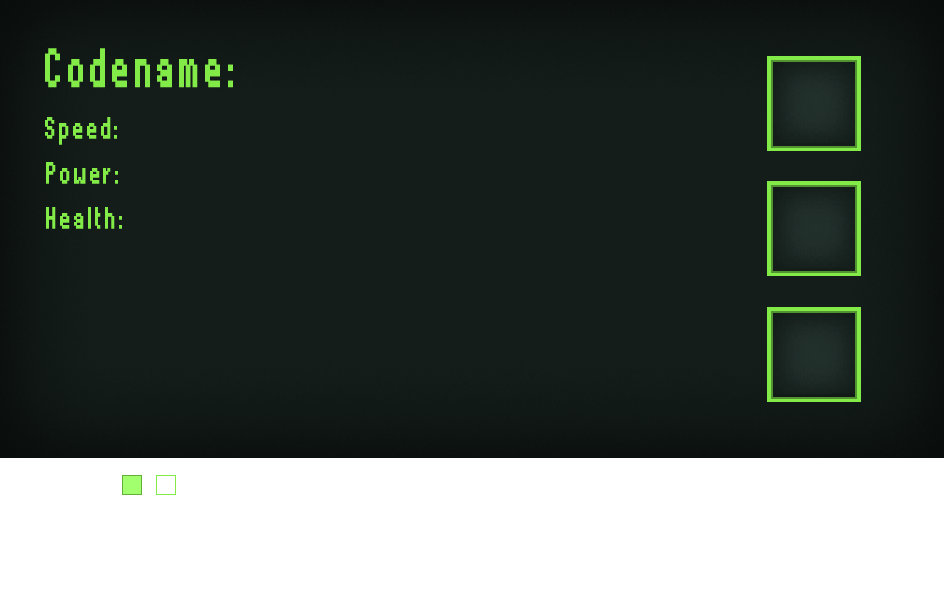
<style>
.page{position:relative;width:944px;height:598px;background:#141d1a}
.page>*{position:absolute;margin:0}
.t1{font:86.4px "Thintel";letter-spacing:0.075em;color:#83eb48;font-weight:bold;scale:0.62 1}
.t2{font:48px "Thintel";letter-spacing:0.075em;color:#83eb48;font-weight:bold;scale:0.69 1}
</style>
<div class="page">
<p class="t1" style="left:45px;top:48px;width:188px;height:40px">Codename:</p>
<p class="t2" style="left:45px;top:117px;width:72px;height:28px">Speed:</p>
<p class="t2" style="left:46px;top:162px;width:72px;height:22px">Power:</p>
<p class="t2" style="left:46px;top:207px;width:76px;height:22px">Health:</p>
</div>
